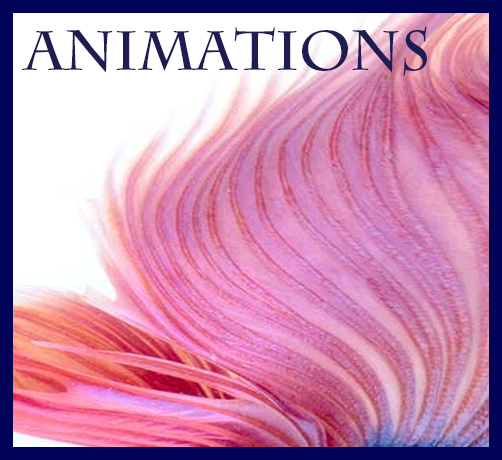
<style>
.page{position:relative;width:502px;height:460px}
.page>*{position:absolute;margin:0}
.t1{font:55px "CharlemagneStd-Bold";color:#1d1c53}
</style>
<div class="page">
<p class="t1" style="left:22px;top:26px;width:405px;height:50px">Animations</p>
</div>
